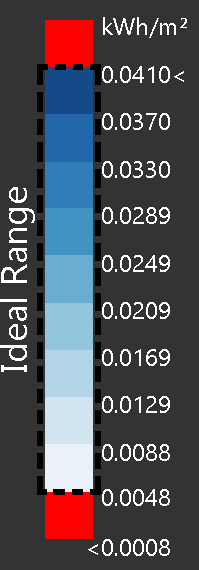
<style>
.page{position:relative;width:199px;height:570px;background:#333333}
.page>*{position:absolute;margin:0}
.t1{font:24px "Gadugi";color:#ffffff}
.t2{font:36px "Gadugi";color:#ffffff}
</style>
<div class="page">
<p class="t1" style="left:103px;top:17px;width:84px;height:21px">kWh/m²</p>
<p class="t1" style="left:102px;top:66px;width:82px;height:17px">0.0410&lt;</p>
<p class="t1" style="left:102px;top:113px;width:68px;height:17px">0.0370</p>
<p class="t1" style="left:102px;top:161px;width:68px;height:17px">0.0330</p>
<p class="t2" style="left:0px;top:187px;width:35px;height:185px;rotate:-90deg">Ideal Range</p>
<p class="t1" style="left:102px;top:207px;width:68px;height:17px">0.0289</p>
<p class="t1" style="left:102px;top:255px;width:68px;height:17px">0.0249</p>
<p class="t1" style="left:102px;top:302px;width:68px;height:17px">0.0209</p>
<p class="t1" style="left:102px;top:349px;width:68px;height:17px">0.0169</p>
<p class="t1" style="left:102px;top:396px;width:68px;height:17px">0.0129</p>
<p class="t1" style="left:102px;top:444px;width:68px;height:17px">0.0088</p>
<p class="t1" style="left:102px;top:489px;width:68px;height:17px">0.0048</p>
<p class="t1" style="left:88px;top:539px;width:82px;height:17px">&lt;0.0008</p>
</div>
